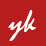
<style>
.page{position:relative;width:46px;height:46px;background:#b71d1d}
.page>*{position:absolute;margin:0}
.t1{font:33.3px "Mistral";color:#ffffff}
</style>
<div class="page">
<p class="t1" style="left:8px;top:10px;width:28px;height:31px">yk</p>
</div>
